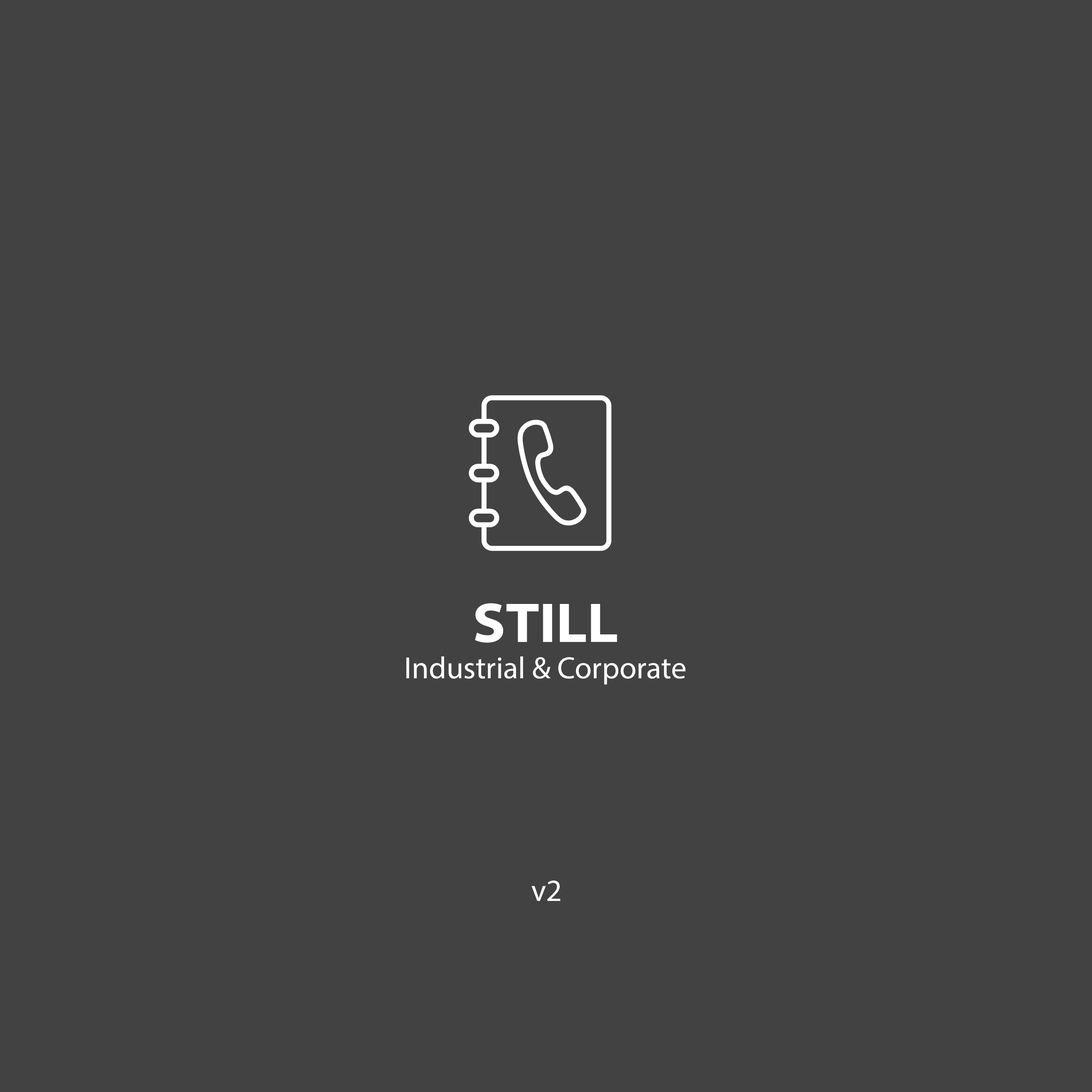
<style>
.page{position:relative;width:1092px;height:1092px;background:#424242}
.page>*{position:absolute;margin:0}
.t1{font:56.3px "MyriadConceptRoman-BoldSemiExtended";color:#ffffff}
.t2{font:30.8px "MyriadConceptRoman-Regular";color:#ffffff}
</style>
<div class="page">
<p class="t1" style="left:475px;top:603px;width:142px;height:40px">STILL</p>
<p class="t2" style="left:406px;top:656px;width:279px;height:29px">Industrial &amp; Corporate</p>
<p class="t2" style="left:532px;top:881px;width:28px;height:20px">v2</p>
</div>
